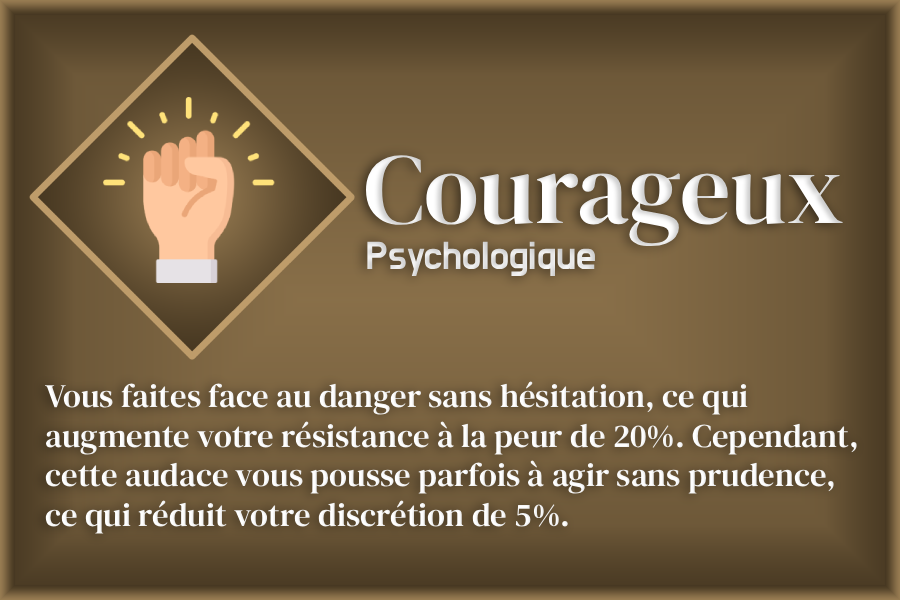
<style>
.page{position:relative;width:900px;height:600px}
.page>*{position:absolute;margin:0}
.t1{font:100px "DMSerifDisplay-Regular";color:#ffffff}
.t2{font:40px "DoHyeon-Regular";color:#e4e4e4}
.t3{font:33px "DMSerifText-Regular";color:#ffffff}
</style>
<div class="page">
<p class="t1" style="left:366px;top:155px;width:477px;height:91px">Courageux</p>
<p class="t2" style="left:367px;top:241px;width:228px;height:35px">Psychologique</p>
<p class="t3" style="left:45px;top:381px;width:812px;height:153px">Vous faites face au danger sans hésitation, ce qui <br>augmente votre résistance à la peur de 20%. Cependant, <br>cette audace vous pousse parfois à agir sans prudence, <br>ce qui réduit votre discrétion de 5%.</p>
</div>
